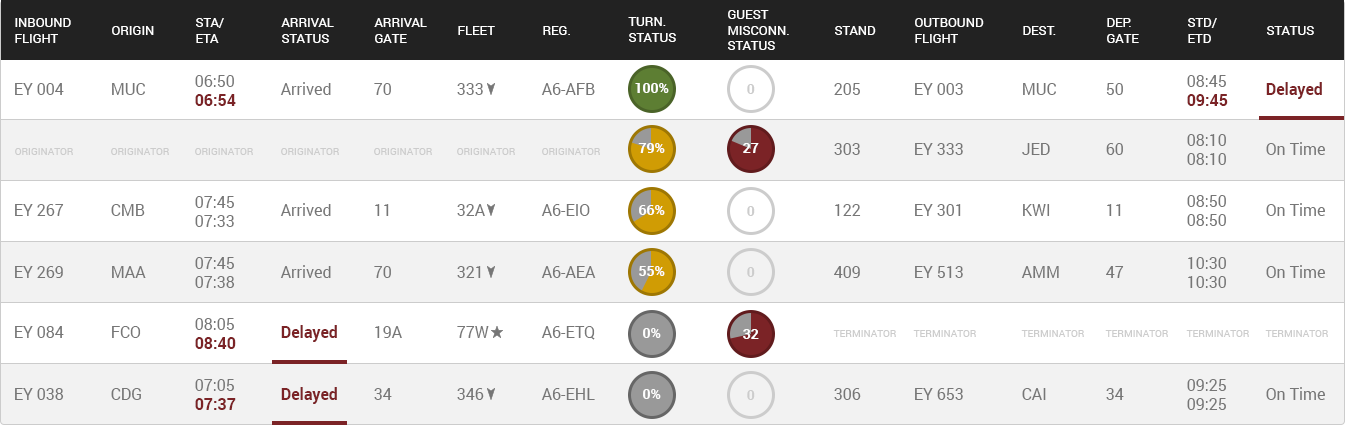
<style>
.page{position:relative;width:1345px;height:425px;background:#f2f2f2}
.page>*{position:absolute;margin:0}
.t1{font:13px "Roboto-Regular";color:#ffffff;text-transform:uppercase}
.t2{font:16px "Roboto-Regular";color:#767676}
.t3{font:16px "Roboto-Bold";color:#7b2326}
.t4{font:14px "Roboto-Bold";color:#fefefe}
.t5{font:14px "Roboto-Bold";color:#cccccc}
.t6{font:10px "Roboto-Regular";color:#cccccc;text-transform:uppercase}
.t7{font:14px "Roboto-Bold";color:#ffffff}
</style>
<div class="page">
<p class="t1" style="left:628px;top:17px;width:48px;height:25px">Turn.<br>Status</p>
<p class="t1" style="left:728px;top:10px;width:61px;height:40px">Guest<br>MisConn.<br>Status</p>
<p class="t1" style="left:15px;top:18px;width:56px;height:25px">Inbound<br>Flight</p>
<p class="t1" style="left:112px;top:26px;width:42px;height:9px">Origin</p>
<p class="t1" style="left:196px;top:18px;width:28px;height:25px">STA/<br>ETA</p>
<p class="t1" style="left:281px;top:18px;width:53px;height:25px">Arrival<br>Status</p>
<p class="t1" style="left:374px;top:18px;width:53px;height:25px">Arrival<br>Gate</p>
<p class="t1" style="left:458px;top:26px;width:37px;height:9px">Fleet</p>
<p class="t1" style="left:543px;top:26px;width:27px;height:9px">REG.</p>
<p class="t1" style="left:835px;top:26px;width:41px;height:9px">Stand</p>
<p class="t1" style="left:915px;top:18px;width:69px;height:25px">Outbound<br>Flight</p>
<p class="t1" style="left:1023px;top:26px;width:33px;height:9px">Dest.</p>
<p class="t1" style="left:1107px;top:18px;width:32px;height:25px">Dep.<br>Gate</p>
<p class="t1" style="left:1188px;top:18px;width:29px;height:25px">STD/<br>etd</p>
<p class="t1" style="left:1267px;top:26px;width:47px;height:9px">Status</p>
<p class="t2" style="left:195px;top:75px;width:41px;height:31px">06:50<br><span class="t3">06:54</span></p>
<p class="t2" style="left:1187px;top:75px;width:41px;height:31px">08:45<br><span class="t3">09:45</span></p>
<p class="t2" style="left:15px;top:83px;width:49px;height:12px">EY 004</p>
<p class="t2" style="left:112px;top:83px;width:33px;height:12px">MUC</p>
<p class="t2" style="left:280px;top:82px;width:51px;height:13px">Arrived</p>
<p class="t2" style="left:374px;top:83px;width:17px;height:12px">70</p>
<p class="t2" style="left:457px;top:83px;width:26px;height:12px">333</p>
<p class="t2" style="left:541px;top:83px;width:54px;height:12px">A6-AFB</p>
<p class="t4" style="left:635px;top:83px;width:34px;height:10px">100%</p>
<p class="t5" style="left:747px;top:84px;width:8px;height:10px">0</p>
<p class="t2" style="left:834px;top:83px;width:26px;height:12px">205</p>
<p class="t2" style="left:915px;top:83px;width:48px;height:12px">EY 003</p>
<p class="t2" style="left:1023px;top:83px;width:33px;height:12px">MUC</p>
<p class="t2" style="left:1106px;top:83px;width:17px;height:12px">50</p>
<p class="t3" style="left:1266px;top:82px;width:56px;height:17px">Delayed</p>
<p class="t2" style="left:1187px;top:134px;width:39px;height:31px">08:10<br>08:10</p>
<p class="t6" style="left:15px;top:148px;width:58px;height:7px">originator</p>
<p class="t6" style="left:111px;top:148px;width:58px;height:7px">originator</p>
<p class="t6" style="left:195px;top:148px;width:58px;height:7px">originator</p>
<p class="t6" style="left:281px;top:148px;width:58px;height:7px">originator</p>
<p class="t6" style="left:374px;top:148px;width:58px;height:7px">originator</p>
<p class="t6" style="left:457px;top:148px;width:58px;height:7px">originator</p>
<p class="t6" style="left:542px;top:148px;width:58px;height:7px">originator</p>
<p class="t4" style="left:638px;top:143px;width:27px;height:10px">79%</p>
<p class="t4" style="left:743px;top:143px;width:16px;height:10px">27</p>
<p class="t2" style="left:834px;top:143px;width:26px;height:12px">303</p>
<p class="t2" style="left:915px;top:143px;width:48px;height:12px">EY 333</p>
<p class="t2" style="left:1022px;top:143px;width:28px;height:12px">JED</p>
<p class="t2" style="left:1106px;top:143px;width:17px;height:12px">60</p>
<p class="t2" style="left:1266px;top:142px;width:59px;height:13px">On Time</p>
<p class="t2" style="left:195px;top:196px;width:39px;height:31px">07:45<br>07:33</p>
<p class="t2" style="left:1187px;top:195px;width:39px;height:31px">08:50<br>08:50</p>
<p class="t2" style="left:15px;top:204px;width:49px;height:12px">EY 267</p>
<p class="t2" style="left:111px;top:204px;width:34px;height:12px">CMB</p>
<p class="t2" style="left:280px;top:203px;width:51px;height:13px">Arrived</p>
<p class="t2" style="left:375px;top:204px;width:14px;height:12px">11</p>
<p class="t2" style="left:457px;top:204px;width:28px;height:12px">32A</p>
<p class="t2" style="left:541px;top:204px;width:49px;height:12px">A6-EIO</p>
<p class="t4" style="left:639px;top:205px;width:26px;height:10px">66%</p>
<p class="t5" style="left:747px;top:206px;width:8px;height:10px">0</p>
<p class="t2" style="left:835px;top:204px;width:26px;height:12px">122</p>
<p class="t2" style="left:915px;top:204px;width:46px;height:12px">EY 301</p>
<p class="t2" style="left:1023px;top:204px;width:27px;height:12px">KWI</p>
<p class="t2" style="left:1107px;top:204px;width:14px;height:12px">11</p>
<p class="t2" style="left:1266px;top:203px;width:59px;height:13px">On Time</p>
<p class="t2" style="left:195px;top:257px;width:40px;height:31px">07:45<br>07:38</p>
<p class="t2" style="left:1188px;top:257px;width:38px;height:31px">10:30<br>10:30</p>
<p class="t2" style="left:15px;top:266px;width:48px;height:12px">EY 269</p>
<p class="t2" style="left:112px;top:266px;width:34px;height:12px">MAA</p>
<p class="t2" style="left:280px;top:265px;width:51px;height:13px">Arrived</p>
<p class="t2" style="left:374px;top:266px;width:17px;height:12px">70</p>
<p class="t2" style="left:457px;top:266px;width:24px;height:12px">321</p>
<p class="t2" style="left:541px;top:266px;width:55px;height:12px">A6-AEA</p>
<p class="t4" style="left:639px;top:266px;width:26px;height:10px">55%</p>
<p class="t5" style="left:747px;top:267px;width:8px;height:10px">0</p>
<p class="t2" style="left:834px;top:266px;width:26px;height:12px">409</p>
<p class="t2" style="left:915px;top:266px;width:48px;height:12px">EY 513</p>
<p class="t2" style="left:1021px;top:266px;width:38px;height:12px">AMM</p>
<p class="t2" style="left:1106px;top:266px;width:18px;height:12px">47</p>
<p class="t2" style="left:1266px;top:265px;width:59px;height:13px">On Time</p>
<p class="t2" style="left:195px;top:318px;width:41px;height:31px">08:05<br><span class="t3">08:40</span></p>
<p class="t2" style="left:15px;top:326px;width:49px;height:12px">EY 084</p>
<p class="t2" style="left:112px;top:326px;width:29px;height:12px">FCO</p>
<p class="t3" style="left:281px;top:325px;width:56px;height:17px">Delayed</p>
<p class="t2" style="left:375px;top:326px;width:27px;height:12px">19A</p>
<p class="t2" style="left:457px;top:326px;width:32px;height:12px">77W</p>
<p class="t2" style="left:541px;top:326px;width:54px;height:14px">A6-ETQ</p>
<p class="t4" style="left:643px;top:328px;width:18px;height:10px">0%</p>
<p class="t7" style="left:743px;top:329px;width:16px;height:10px">32</p>
<p class="t6" style="left:833px;top:330px;width:63px;height:7px">TERMINATOR</p>
<p class="t6" style="left:913px;top:330px;width:63px;height:7px">TERMINATOR</p>
<p class="t6" style="left:1021px;top:330px;width:63px;height:7px">TERMINATOR</p>
<p class="t6" style="left:1105px;top:330px;width:63px;height:7px">TERMINATOR</p>
<p class="t6" style="left:1186px;top:330px;width:63px;height:7px">TERMINATOR</p>
<p class="t6" style="left:1265px;top:330px;width:63px;height:7px">TERMINATOR</p>
<p class="t2" style="left:15px;top:388px;width:49px;height:12px">EY 038</p>
<p class="t2" style="left:111px;top:388px;width:30px;height:12px">CDG</p>
<p class="t2" style="left:195px;top:379px;width:41px;height:31px">07:05<br><span class="t3">07:37</span></p>
<p class="t3" style="left:281px;top:387px;width:56px;height:17px">Delayed</p>
<p class="t2" style="left:374px;top:388px;width:18px;height:12px">34</p>
<p class="t2" style="left:457px;top:388px;width:27px;height:12px">346</p>
<p class="t2" style="left:541px;top:388px;width:54px;height:12px">A6-EHL</p>
<p class="t4" style="left:643px;top:389px;width:18px;height:10px">0%</p>
<p class="t5" style="left:747px;top:390px;width:8px;height:10px">0</p>
<p class="t2" style="left:834px;top:388px;width:27px;height:12px">306</p>
<p class="t2" style="left:915px;top:388px;width:48px;height:12px">EY 653</p>
<p class="t2" style="left:1022px;top:388px;width:24px;height:12px">CAI</p>
<p class="t2" style="left:1106px;top:388px;width:18px;height:12px">34</p>
<p class="t2" style="left:1187px;top:379px;width:39px;height:31px">09:25<br>09:25</p>
<p class="t2" style="left:1266px;top:387px;width:59px;height:13px">On Time</p>
</div>
